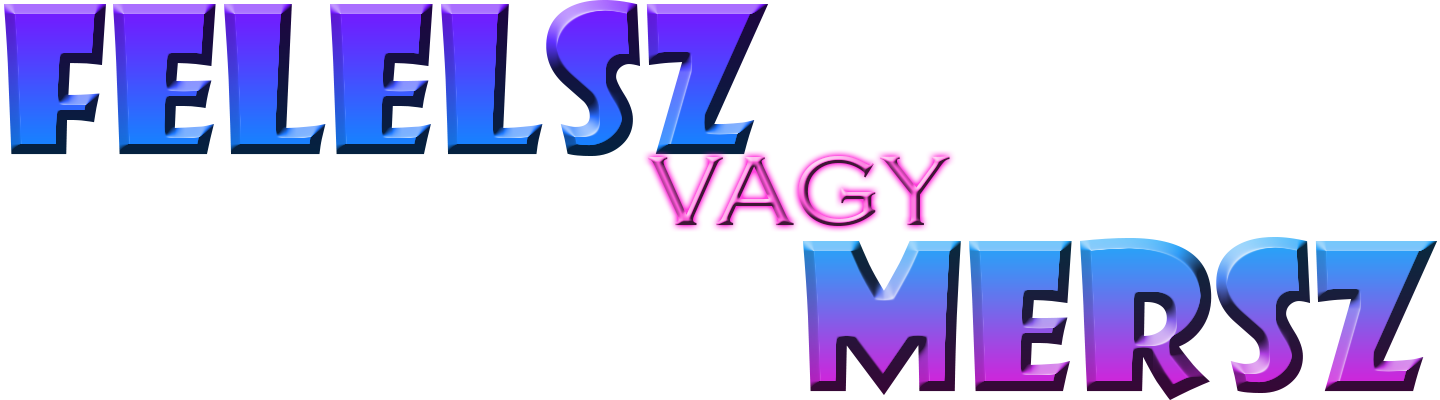
<style>
.page{position:relative;width:1440px;height:400px;background:#ffffff}
.page>*{position:absolute;margin:0}
.t1{font:200.1px "ShowcardGothic-Reg"}
.t2{font:125.1px "CopperplateGothic-Light"}
</style>
<div class="page">
<p class="t1" style="left:3px;top:0px;width:766px;height:156px">Felelsz</p>
<p class="t2" style="left:648px;top:156px;width:302px;height:70px">vagy</p>
<p class="t1" style="left:802px;top:237px;width:636px;height:163px">Mersz</p>
</div>
